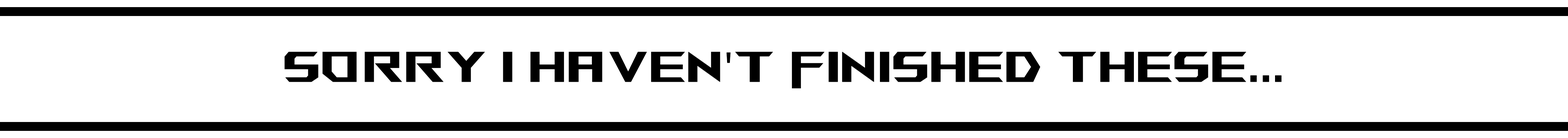
<style>
.page{position:relative;width:1568px;height:138px;background:#ffffff}
.page>*{position:absolute;margin:0}
.t1{font:42.6px "AniMeMatrix-MB_EN";color:#000000;font-weight:bold}
.t2{font:42.6px "MyriadPro-Regular";color:#000000;font-weight:bold}
</style>
<div class="page">
<p class="t1" style="left:284px;top:51px;width:998px;height:37px">SORRY i HAVEN<span class="t2">'</span>T FINISHED THESE...</p>
</div>
